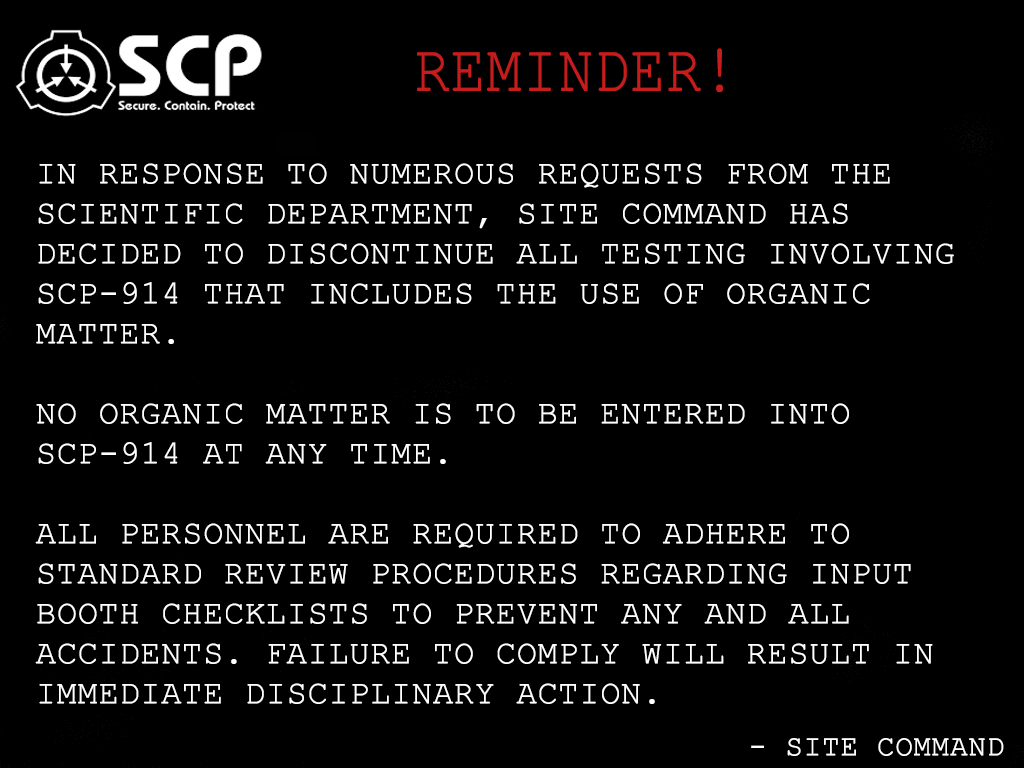
<style>
.page{position:relative;width:1024px;height:768px;background:#000000}
.page>*{position:absolute;margin:0}
.t1{font:66.7px "CourierNewPSMT";color:#c61c1c;text-transform:uppercase;font-weight:bold;scale:0.86 1}
.t2{font:33.3px "CourierNewPSMT";color:#ffffff;text-transform:uppercase;font-weight:bold}
.t3{font:29.2px "CourierNewPSMT";color:#ffffff;text-transform:uppercase;font-weight:bold}
</style>
<div class="page">
<p class="t1" style="left:417px;top:48px;width:306px;height:44px">Reminder!</p>
<p class="t2" style="left:35px;top:163px;width:919px;height:541px;text-align:justify"><span class="t3"><br></span>In response to numerous requests from the Scientific Department, Site Command has decided to discontinue all testing involving SCP-914 that includes the use of organic matter. <br><br>No organic matter is to be entered into SCP-914 at any time.<br><br>All personnel are required to adhere to standard review procedures regarding input booth checklists to prevent any and all accidents. Failure to comply will result in immediate disciplinary action.</p>
<p class="t3" style="left:751px;top:738px;width:253px;height:18px">- Site command</p>
</div>
